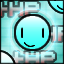
<style>
.page{position:relative;width:64px;height:64px}
.page>*{position:absolute;margin:0}
.t1{font:14px "M41_LOVEBIT"}
</style>
<div class="page">
<p class="t1" style="left:9px;top:52px;width:46px;height:14px">+HP</p>
</div>
